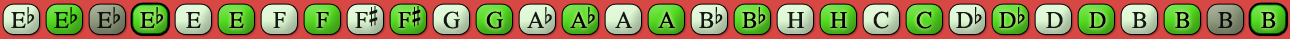
<style>
.page{position:relative;width:1290px;height:39px}
.page>*{position:absolute;margin:0}
.t1{font:24px "OpusChords";color:#000000}
.t2{font:24px "OpusChords";letter-spacing:-0.05em;color:#000000}
</style>
<div class="page">
<p class="t1" style="left:355px;top:6px;width:23px;height:22px;opacity:0.9">F#</p>
<p class="t1" style="left:398px;top:6px;width:23px;height:22px">F#</p>
<p class="t1" style="left:11px;top:7px;width:24px;height:21px;opacity:0.9">Eb</p>
<p class="t1" style="left:54px;top:7px;width:24px;height:21px;opacity:0.9">Eb</p>
<p class="t1" style="left:97px;top:7px;width:24px;height:21px;opacity:0.9">Eb</p>
<p class="t1" style="left:140px;top:7px;width:24px;height:21px">Eb</p>
<p class="t1" style="left:186px;top:12px;width:15px;height:16px;opacity:0.9">E</p>
<p class="t1" style="left:229px;top:12px;width:15px;height:16px">E</p>
<p class="t1" style="left:273px;top:12px;width:13px;height:16px;opacity:0.9">F</p>
<p class="t1" style="left:316px;top:12px;width:13px;height:16px">F</p>
<p class="t1" style="left:443px;top:11px;width:17px;height:18px;opacity:0.9">G</p>
<p class="t1" style="left:486px;top:11px;width:17px;height:18px">G</p>
<p class="t2" style="left:527px;top:7px;width:25px;height:21px;opacity:0.9">Ab</p>
<p class="t2" style="left:570px;top:7px;width:25px;height:21px">Ab</p>
<p class="t1" style="left:615px;top:11px;width:17px;height:17px;opacity:0.9">A</p>
<p class="t1" style="left:658px;top:11px;width:17px;height:17px">A</p>
<p class="t1" style="left:699px;top:7px;width:24px;height:21px;opacity:0.9">Bb</p>
<p class="t1" style="left:742px;top:7px;width:24px;height:21px">Bb</p>
<p class="t1" style="left:787px;top:12px;width:17px;height:16px;opacity:0.9">H</p>
<p class="t1" style="left:830px;top:12px;width:17px;height:16px">H</p>
<p class="t1" style="left:873px;top:11px;width:16px;height:18px;opacity:0.9">C</p>
<p class="t1" style="left:916px;top:11px;width:16px;height:18px">C</p>
<p class="t1" style="left:956px;top:7px;width:26px;height:21px;opacity:0.9">Db</p>
<p class="t1" style="left:999px;top:7px;width:26px;height:21px">Db</p>
<p class="t1" style="left:1046px;top:12px;width:17px;height:16px;opacity:0.9">D</p>
<p class="t1" style="left:1089px;top:12px;width:17px;height:16px">D</p>
<p class="t1" style="left:1132px;top:12px;width:15px;height:16px;opacity:0.9">B</p>
<p class="t1" style="left:1175px;top:12px;width:15px;height:16px">B</p>
<p class="t1" style="left:1218px;top:12px;width:15px;height:16px;opacity:0.9">B</p>
<p class="t1" style="left:1261px;top:12px;width:15px;height:16px">B</p>
</div>
